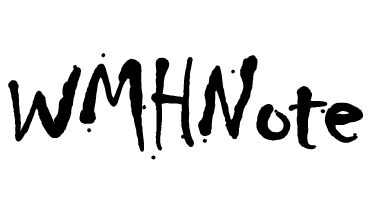
<style>
.page{position:relative;width:372px;height:212px;background:#ffffff}
.page>*{position:absolute;margin:0}
.t1{font:125px "Chiller-Regular";letter-spacing:-0.02em;color:#000000}
</style>
<div class="page">
<p class="t1" style="left:9px;top:54px;width:353px;height:105px">WMHNote</p>
</div>
